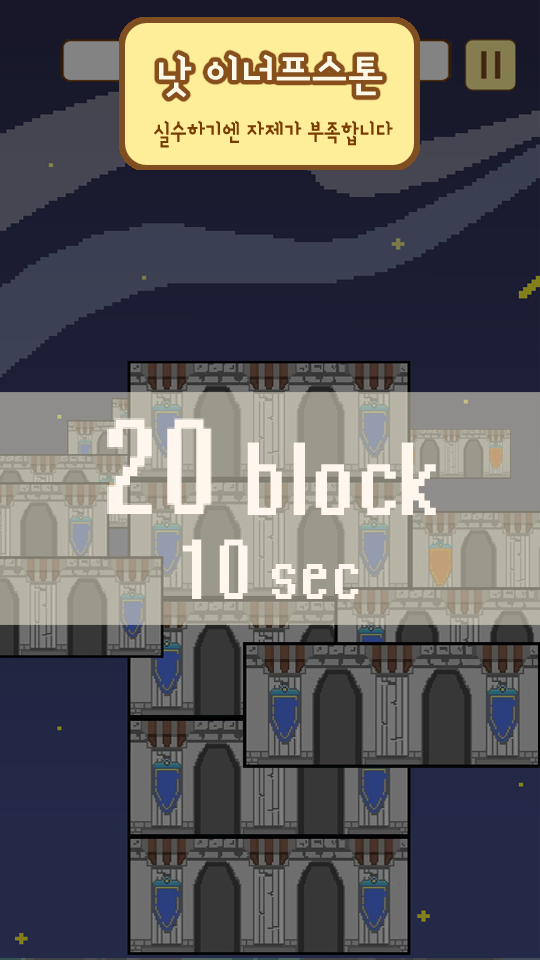
<style>
.page{position:relative;width:540px;height:960px}
.page>*{position:absolute;margin:0}
.t1{font:44.4px "designhouseBold";color:#fff9ea}
.t2{font:24px "designhouseBold";color:#783b00;scale:0.84 1}
.t3{font:27.5px "designhouseBold";color:#010000;scale:0.84 1}
.t4{font:116.2px/14px "System";color:#fff7ee;scale:0.78 1}
.t5{font:152.1px/14px "System";color:#fff7ee;scale:0.78 1}
.t6{font:95px/14px "System";color:#fff7ee;scale:0.78 1}
.t7{font:80px/14px "System";color:#fff7ee;scale:0.78 1}
</style>
<div class="page">
<p class="t1" style="left:159px;top:54px;width:224px;height:44px">낫 이너프스톤</p>
<p class="t2" style="left:154px;top:120px;width:239px;height:28px"><span class="t3"> </span>실수하기엔 자제가 부족합니다</p>
<p class="t4" style="left:107px;top:418px;width:329px;height:181px;text-align:center"><span class="t5">20</span> block<br><br><br><br><br><br><span class="t6">10</span><span class="t7"> sec</span></p>
</div>
